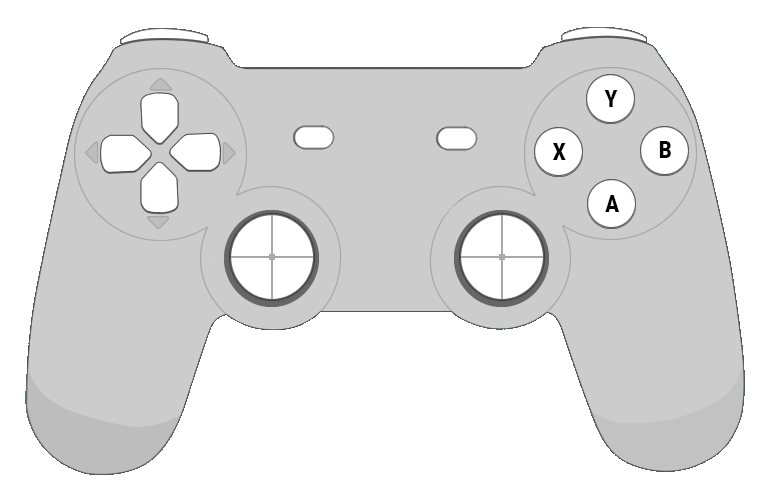
<style>
.page{position:relative;width:771px;height:501px;background:#ffffff}
.page>*{position:absolute;margin:0}
.t1{font:24px "RobotoCondensed-Bold";color:#000000}
</style>
<div class="page">
<p class="t1" style="left:604px;top:90px;width:14px;height:17px">Y</p>
<p class="t1" style="left:552px;top:143px;width:14px;height:17px">X</p>
<p class="t1" style="left:659px;top:141px;width:12px;height:17px">B</p>
<p class="t1" style="left:605px;top:195px;width:15px;height:17px">A</p>
</div>
